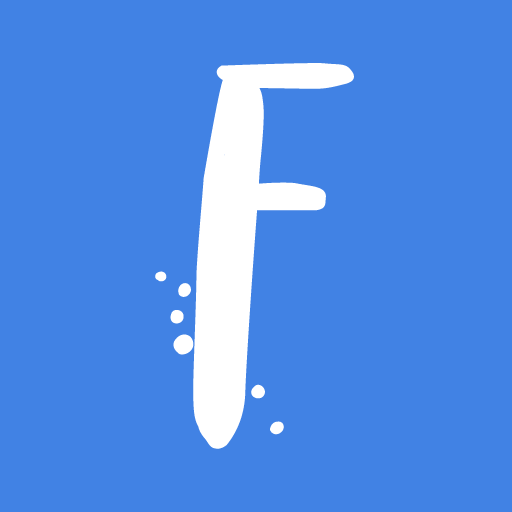
<style>
.page{position:relative;width:512px;height:512px;background:#4182e4}
.page>*{position:absolute;margin:0}
.t1{font:800px "Coaster-Quake---Personal-Use";letter-spacing:0.015em;color:#ffffff;font-weight:bold}
</style>
<div class="page">
<p class="t1" style="left:155px;top:63px;width:199px;height:386px">F</p>
</div>
